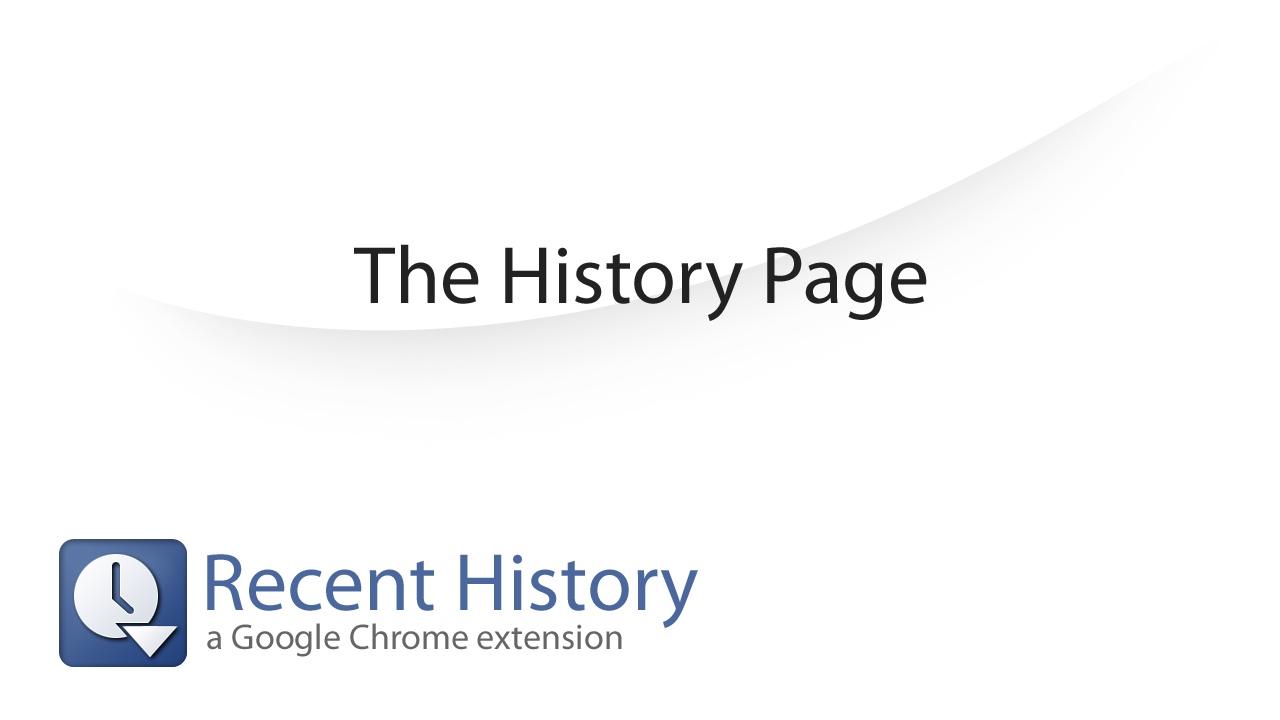
<style>
.page{position:relative;width:1280px;height:720px;background:#ffffff}
.page>*{position:absolute;margin:0}
.t1{font:82px "MyriadPro-Regular";color:#222222}
.t2{font:82px "MyriadPro-Regular";color:#4a689e}
.t3{font:36px "MyriadPro-Regular";color:#666666}
</style>
<div class="page">
<p class="t1" style="left:354px;top:244px;width:573px;height:77px">The History Page</p>
<p class="t2" style="left:207px;top:554px;width:491px;height:74px">Recent History</p>
<p class="t3" style="left:207px;top:623px;width:415px;height:34px">a Google Chrome extension</p>
</div>
